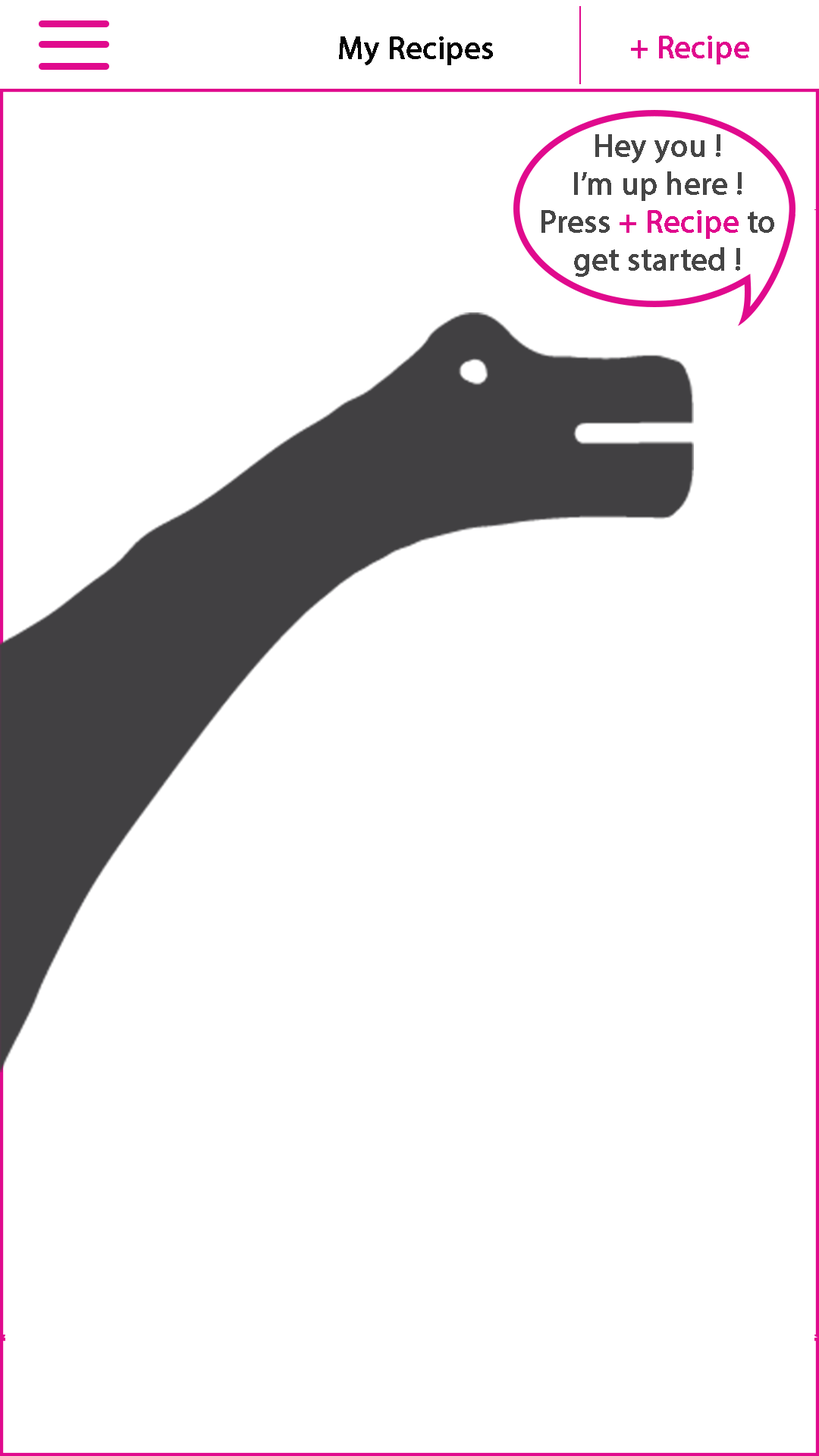
<style>
.page{position:relative;width:819px;height:1456px;background:#ffffff}
.page>*{position:absolute;margin:0}
.t1{font:31.6px "MyriadPro-Regular";color:#040404;font-weight:bold}
.t2{font:31.6px "MyriadPro-Regular";color:#e00a8d;font-weight:bold}
.t3{font:31.6px "MyriadPro-Regular";color:#454545;font-weight:bold}
</style>
<div class="page">
<p class="t1" style="left:339px;top:36px;width:154px;height:29px">My Recipes</p>
<p class="t2" style="left:631px;top:36px;width:118px;height:28px">+ Recipe</p>
<p class="t3" style="left:541px;top:134px;width:233px;height:143px;text-align:center">Hey you !<br>I’m up here !<br>Press <span class="t2">+ Recipe</span> to<br>get started !</p>
</div>
